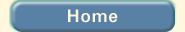
<style>
.page{position:relative;width:185px;height:32px;background:#5981a6}
.page>*{position:absolute;margin:0}
.t1{font:18px "Univers-Bold";letter-spacing:0.05em;color:#fff8de}
</style>
<div class="page">
<p class="t1" style="left:68px;top:9px;width:50px;height:14px">Home</p>
</div>
